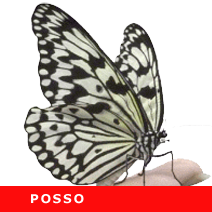
<style>
.page{position:relative;width:212px;height:212px;background:#ffffff}
.page>*{position:absolute;margin:0}
.t1{font:12px "Verdana-Bold";letter-spacing:0.16em;color:#ffffff}
</style>
<div class="page">
<p class="t1" style="left:31px;top:194px;width:53px;height:10px">POSSO</p>
</div>
